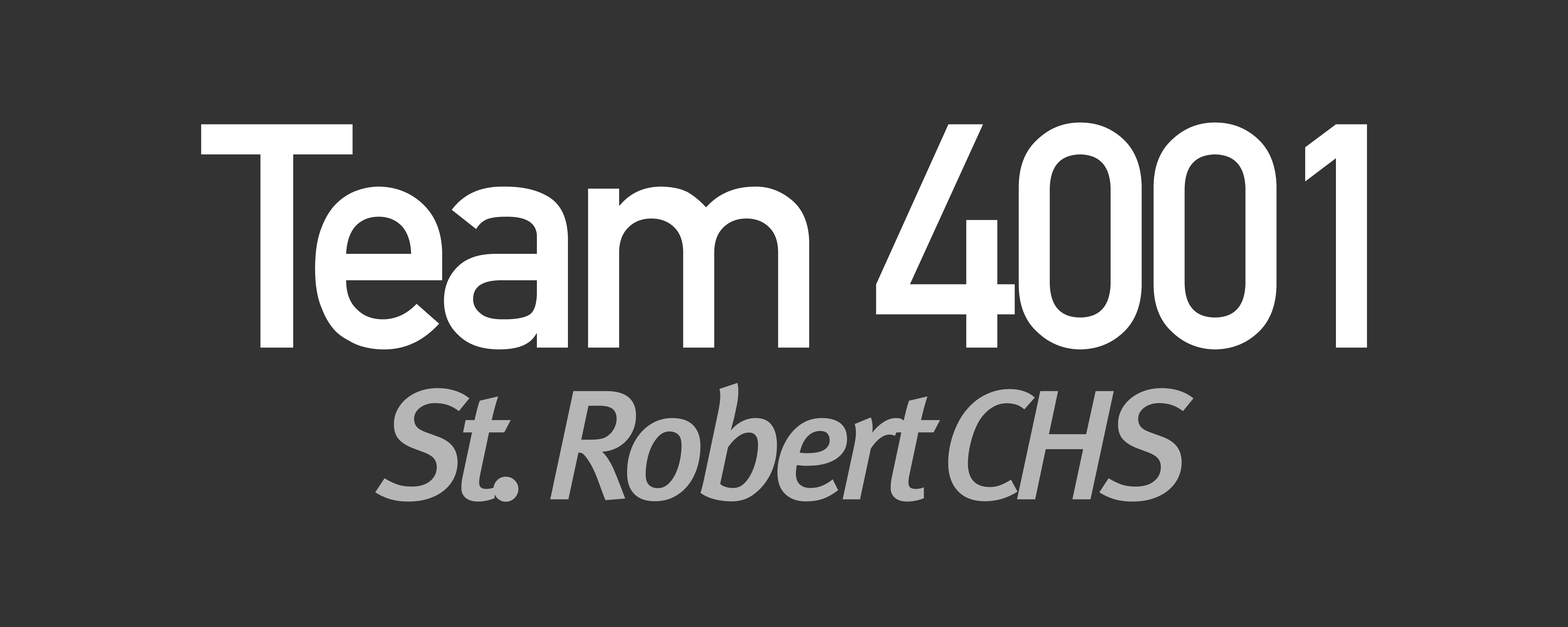
<style>
.page{position:relative;width:1568px;height:627px;background:#333333}
.page>*{position:absolute;margin:0}
.t1{font:313.6px "DINAlternate-Bold";letter-spacing:-0.075em;color:#ffffff}
.t2{font:313.6px "DINAlternate-Bold";letter-spacing:-0.05em;color:#ffffff}
.t3{font:156.8px "MetaMediumLF-Italic";letter-spacing:-0.075em;color:#b6b6b6}
</style>
<div class="page">
<p class="t1" style="left:201px;top:122px;width:1166px;height:228px">Team<span class="t2"> 4001</span></p>
<p class="t3" style="left:375px;top:383px;width:819px;height:119px">St. Robert CHS</p>
</div>
